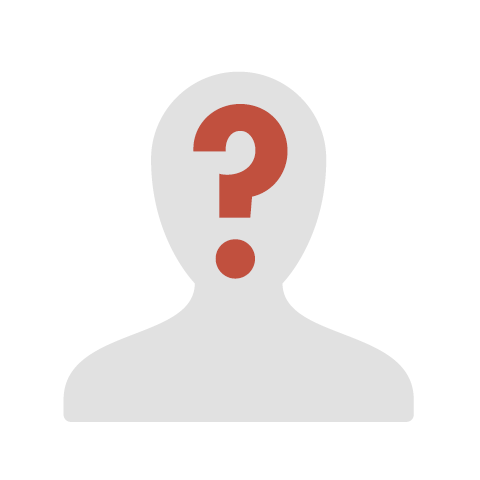
<style>
.page{position:relative;width:480px;height:480px;background:#ffffff}
.page>*{position:absolute;margin:0}
.t1{font:350px "SSStandard";color:#e1e1e1}
.t2{font:220px "Futura-Heavy";color:#c1503e}
</style>
<div class="page">
<p class="t1" style="left:63px;top:71px;width:351px;height:351px">user</p>
<p class="t2" style="left:193px;top:104px;width:95px;height:175px">?</p>
</div>
